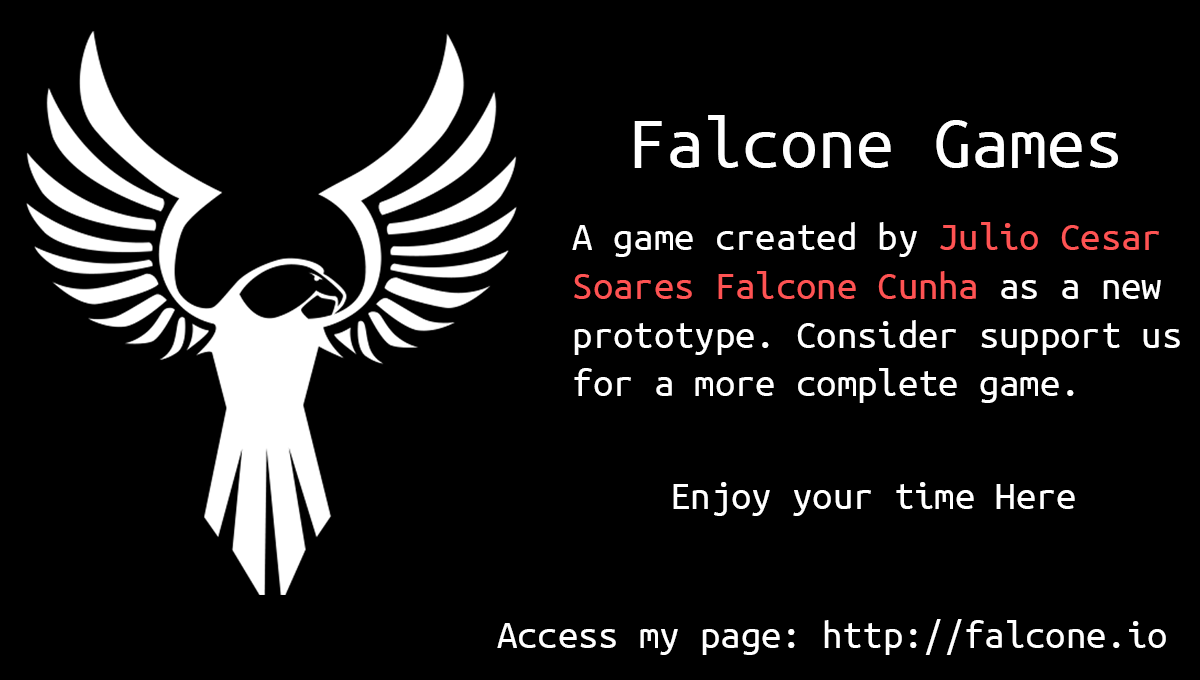
<style>
.page{position:relative;width:1200px;height:680px;background:#000000}
.page>*{position:absolute;margin:0}
.t1{font:76.2px "UbuntuMono-Regular";color:#ffffff}
.t2{font:40.6px "UbuntuMono-Regular";color:#ffffff}
.t3{font:40.6px "UbuntuMono-Regular";color:#fe5353}
</style>
<div class="page">
<p class="t1" style="left:634px;top:115px;width:484px;height:53px">Falcone Games</p>
<p class="t2" style="left:572px;top:222px;width:608px;height:181px">A game created by <span class="t3">Julio Cesar<br>Soares Falcone Cunha</span> as a new<br>prototype. Consider support us<br>for a more complete game.</p>
<p class="t2" style="left:673px;top:482px;width:402px;height:34px">Enjoy your time Here</p>
<p class="t2" style="left:497px;top:619px;width:669px;height:36px">Access my page: http://falcone.io</p>
</div>
